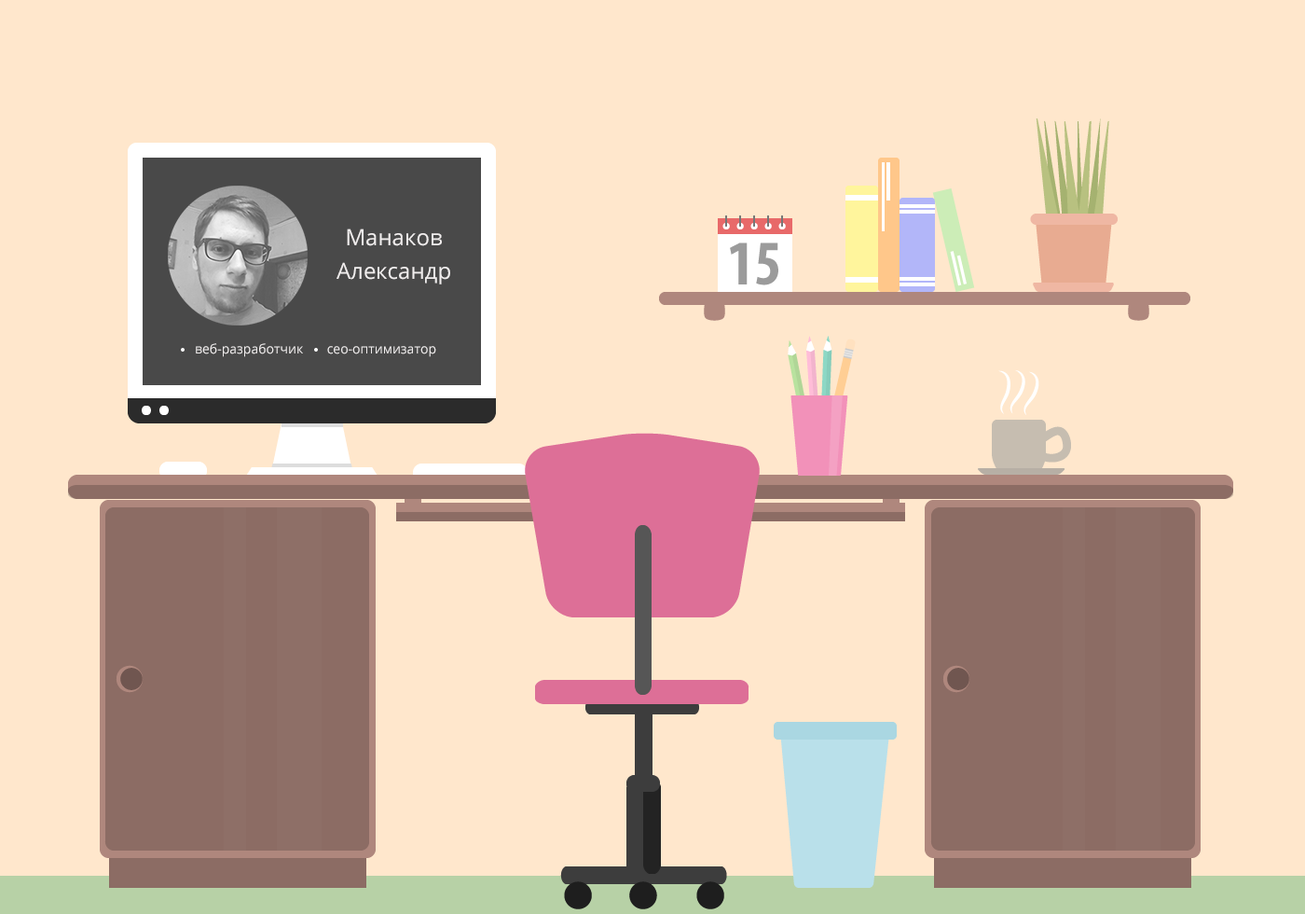
<style>
.page{position:relative;width:1305px;height:914px;background:#ffe7cc}
.page>*{position:absolute;margin:0}
.t1{font:22.4px/33.6px "OpenSans";color:#f0eded}
.t2{font:13.1px "OpenSans";color:#f0eded}
</style>
<div class="page">
<p class="t1" style="left:337px;top:228px;width:113px;height:56px;text-align:center">Манаков<br>Александр</p>
<p class="t2" style="left:196px;top:343px;width:240px;height:14px">веб-разработчик       сео-оптимизатор</p>
</div>
